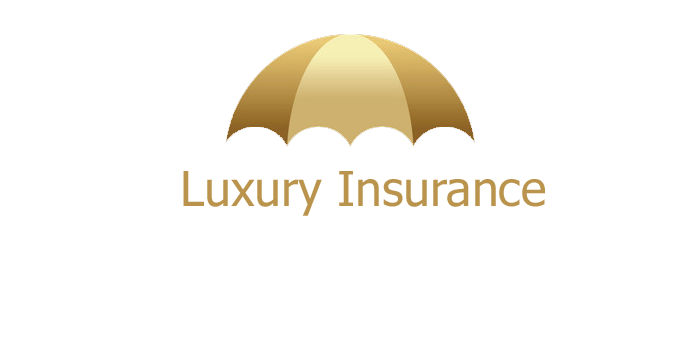
<style>
.page{position:relative;width:680px;height:340px;background:#ffffff}
.page>*{position:absolute;margin:0}
.t1{font:48px "Tahoma";color:#ba944d}
</style>
<div class="page">
<p class="t1" style="left:183px;top:171px;width:362px;height:45px">Luxury Insurance</p>
</div>
